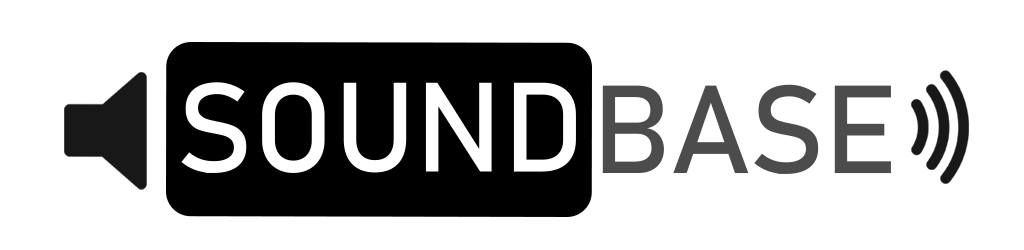
<style>
.page{position:relative;width:1024px;height:250px;background:#ffffff}
.page>*{position:absolute;margin:0}
.t1{font:125.3px "Bahnschrift";color:#ffffff}
.t2{font:122.6px "Bahnschrift";color:#4c4c4c}
</style>
<div class="page">
<p class="t1" style="left:181px;top:82px;width:395px;height:91px">SOUND</p>
<p class="t2" style="left:602px;top:84px;width:289px;height:90px">BASE</p>
</div>
